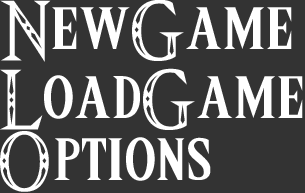
<style>
.page{position:relative;width:305px;height:193px;background:#333333}
.page>*{position:absolute;margin:0}
.t1{font:68.9px "Triforce";letter-spacing:0.025em;color:#ffffff}
</style>
<div class="page">
<p class="t1" style="left:0px;top:0px;width:292px;height:62px">NewGame</p>
<p class="t1" style="left:0px;top:68px;width:303px;height:62px">LoadGame</p>
<p class="t1" style="left:0px;top:131px;width:211px;height:61px">Options</p>
</div>
